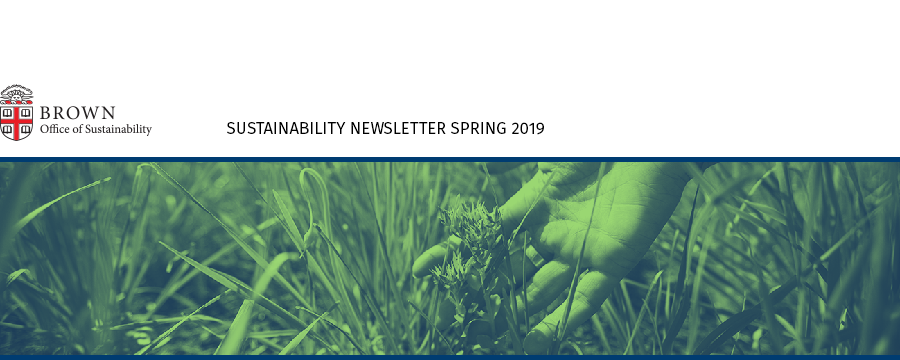
<style>
.page{position:relative;width:900px;height:360px;background:#ffffff}
.page>*{position:absolute;margin:0}
.t1{font:16.7px "FiraSans-Book";letter-spacing:0.005em;color:#000000;text-transform:uppercase}
</style>
<div class="page">
<p class="t1" style="left:227px;top:122px;width:317px;height:13px">Sustainability Newsletter Spring 2019</p>
</div>
